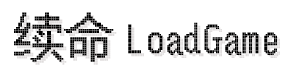
<style>
.page{position:relative;width:300px;height:75px;background:#ffffff}
.page>*{position:absolute;margin:0}
.t1{font:49.5px "FZXS24--GB1-0";color:#000000}
.t2{font:38.6px "FZXS24--GB1-0";color:#000000}
</style>
<div class="page">
<p class="t1" style="left:14px;top:12px;width:100px;height:50px">续命</p>
<p class="t2" style="left:128px;top:22px;width:149px;height:33px">LoadGame</p>
</div>
